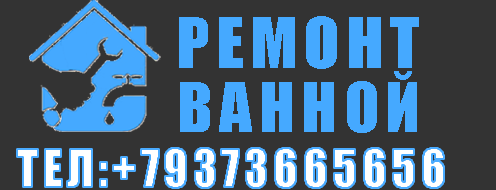
<style>
.page{position:relative;width:496px;height:190px;background:#333333}
.page>*{position:absolute;margin:0}
.t1{font:64.1px "Impact";letter-spacing:0.1em;color:#45a9ff}
.t2{font:63.2px "Impact";letter-spacing:0.1em;color:#45a9ff}
.t3{font:48px "Impact";letter-spacing:0.075em;color:#ffffff}
</style>
<div class="page">
<p class="t1" style="left:179px;top:16px;width:240px;height:53px">РЕМОНТ</p>
<p class="t2" style="left:180px;top:71px;width:237px;height:62px">ВАННОЙ</p>
<p class="t3" style="left:17px;top:148px;width:427px;height:40px">ТЕЛ:+79373665656</p>
</div>
